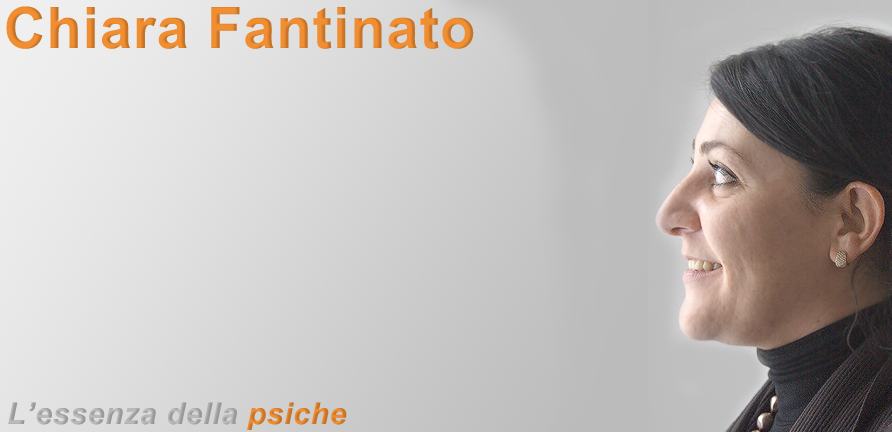
<style>
.page{position:relative;width:892px;height:432px}
.page>*{position:absolute;margin:0}
.t1{font:57px "Arial-BoldMT";letter-spacing:0.025em;color:#f18e31}
.t2{font:30px "Arial-BoldItalicMT";letter-spacing:0.025em;color:#bbbbbb}
.t3{font:30px "Arial-BoldItalicMT";letter-spacing:0.025em;color:#f18e31}
</style>
<div class="page">
<p class="t1" style="left:6px;top:6px;width:468px;height:43px">Chiara Fantinato</p>
<p class="t2" style="left:8px;top:402px;width:339px;height:28px">L’essenza della<span class="t3"> psiche</span></p>
</div>
